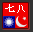
<style>
.page{position:relative;width:33px;height:32px;background:#f20000}
.page>*{position:absolute;margin:0}
.t1{font:10.4px "SimSun";color:#ffffff}
</style>
<div class="page">
<p class="t1" style="left:5px;top:4px;width:20px;height:9px">七八</p>
</div>
